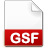
<style>
.page{position:relative;width:48px;height:48px;background:#ffffff}
.page>*{position:absolute;margin:0}
.t1{font:14px "ArialRoundedMTBold";color:#ffffff}
</style>
<div class="page">
<p class="t1" style="left:10px;top:32px;width:29px;height:12px">GSF</p>
</div>
